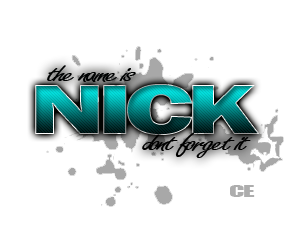
<style>
.page{position:relative;width:290px;height:250px;background:#ffffff}
.page>*{position:absolute;margin:0}
.t1{font:27.4px "FreestyleScript-Regular";letter-spacing:-0.075em;color:#010101;scale:1.53 1}
.t2{font:73px "FranklinGothic-Heavy";letter-spacing:-0.075em;scale:1.53 1}
.t3{font:15.5px "Impact";letter-spacing:-0.05em;color:#adadad;scale:1.8 1}
</style>
<div class="page">
<p class="t1" style="left:47px;top:65px;width:89px;height:17px">the name is</p>
<p class="t2" style="left:35px;top:84px;width:225px;height:51px">NICK</p>
<p class="t1" style="left:142px;top:133px;width:109px;height:25px">dont forget it</p>
<p class="t3" style="left:230px;top:185px;width:25px;height:12px">CE</p>
</div>
